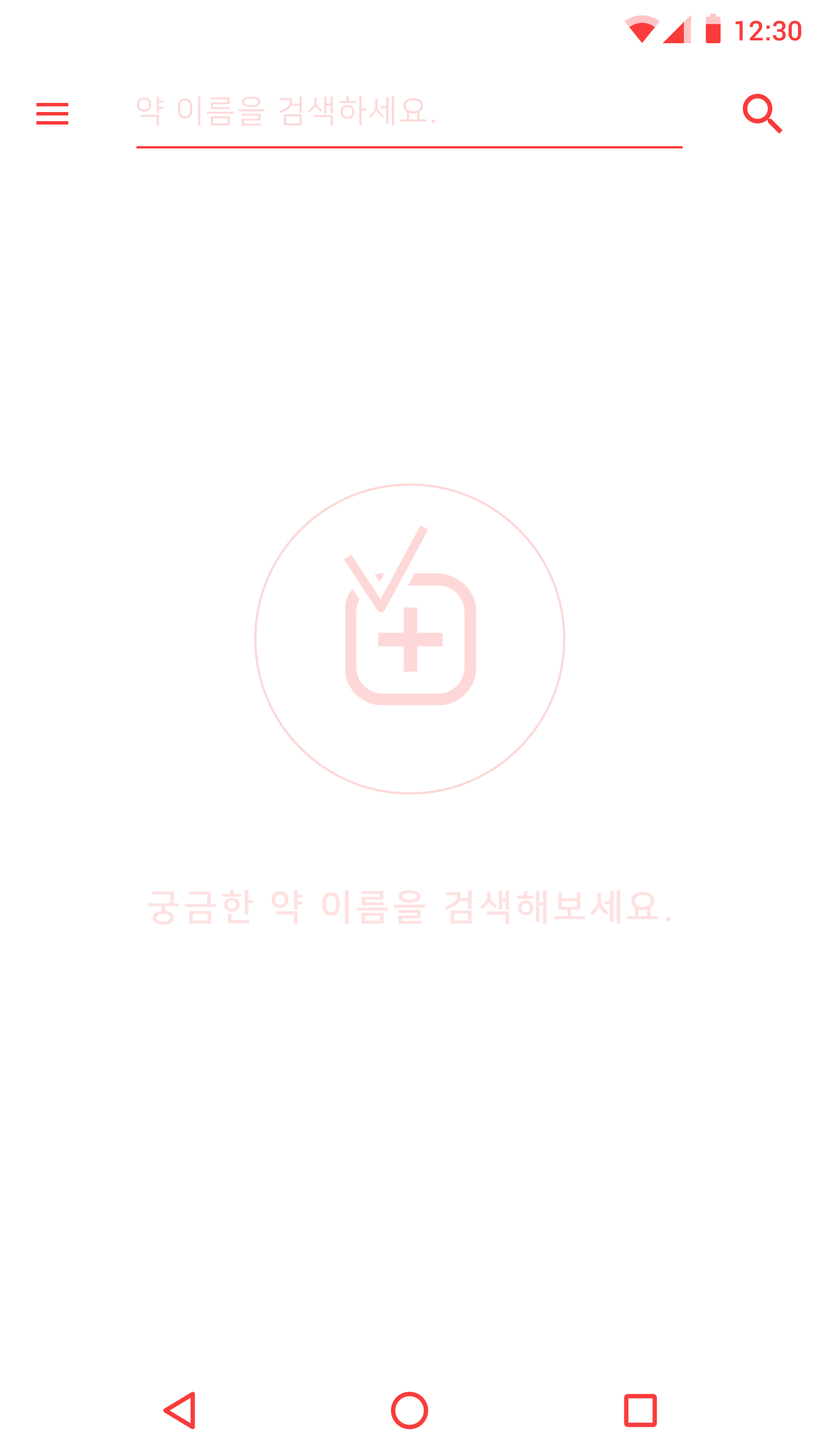
<style>
.page{position:relative;width:819px;height:1456px;background:#ffffff}
.page>*{position:absolute;margin:0}
.t1{font:27.3px "Roboto-Medium";color:#fa3b3b}
.t2{font:31.8px "NanumSquareR";letter-spacing:0.05em;color:#fed8d8}
.t3{font:36.4px "NanumSquareB";letter-spacing:0.1em;color:#fee1e1}
</style>
<div class="page">
<p class="t1" style="left:735px;top:20px;width:66px;height:21px">12:30</p>
<p class="t2" style="left:136px;top:96px;width:299px;height:30px">약 이름을 검색하세요.</p>
<p class="t3" style="left:148px;top:890px;width:523px;height:35px">궁금한 약 이름을 검색해보세요.</p>
</div>
